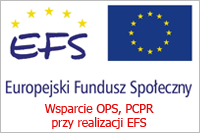
<style>
.page{position:relative;width:200px;height:133px;background:#ffffff}
.page>*{position:absolute;margin:0}
.t1{font:12px "Tahoma";color:#e40808}
</style>
<div class="page">
<p class="t1" style="left:44px;top:104px;width:110px;height:25px;text-align:center">Wsparcie OPS, PCPR<br>przy realizacji EFS</p>
</div>
